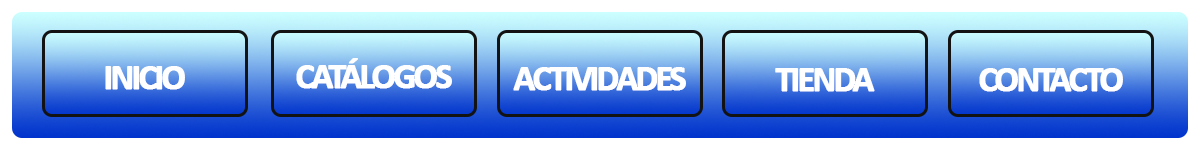
<style>
.page{position:relative;width:1200px;height:150px;background:#ffffff}
.page>*{position:absolute;margin:0}
.t1{font:36px "Calibri-Bold";letter-spacing:-0.1em;color:#ffffff;font-weight:bold}
</style>
<div class="page">
<p class="t1" style="left:296px;top:58px;width:156px;height:31px">CATÁLOGOS</p>
<p class="t1" style="left:105px;top:66px;width:80px;height:24px">INICIO</p>
<p class="t1" style="left:513px;top:67px;width:173px;height:24px">ACTIVIDADES</p>
<p class="t1" style="left:775px;top:68px;width:100px;height:24px">TIENDA</p>
<p class="t1" style="left:979px;top:68px;width:144px;height:24px">CONTACTO</p>
</div>
